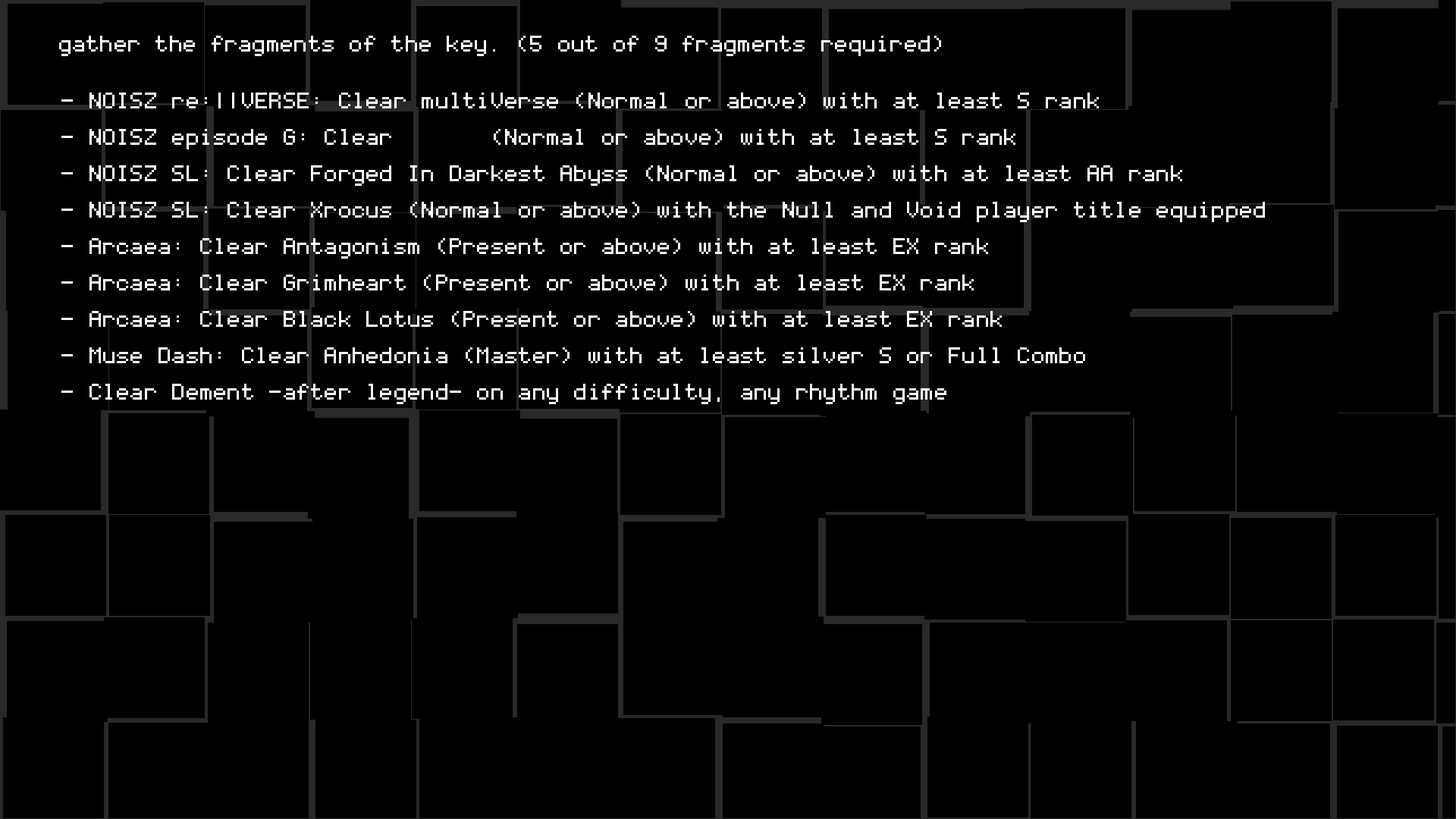
<style>
.page{position:relative;width:1456px;height:819px;background:#000000}
.page>*{position:absolute;margin:0}
.t1{font:36.4px "Coder's-Crux";color:#ffffff}
.t2{font:36.4px/36.4px "Coder's-Crux";color:#ffffff}
</style>
<div class="page">
<p class="t1" style="left:59px;top:36px;width:882px;height:20px">gather the fragments of the key. (5 out of 9 fragments required)</p>
<p class="t2" style="left:61px;top:93px;width:1204px;height:311px">- NOISZ re:||VERSE: Clear multiVerse (Normal or above) with at least S rank<br>- NOISZ episode G: Clear       (Normal or above) with at least S rank<br>- NOISZ SL: Clear Forged In Darkest Abyss (Normal or above) with at least AA rank<br>- NOISZ SL: Clear Xrocus (Normal or above) with the Null and Void player title equipped<br>- Arcaea: Clear Antagonism (Present or above) with at least EX rank<br>- Arcaea: Clear Grimheart (Present or above) with at least EX rank<br>- Arcaea: Clear Black Lotus (Present or above) with at least EX rank<br>- Muse Dash: Clear Anhedonia (Master) with at least silver S or Full Combo<br>- Clear Dement -after legend- on any difficulty, any rhythm game</p>
</div>
